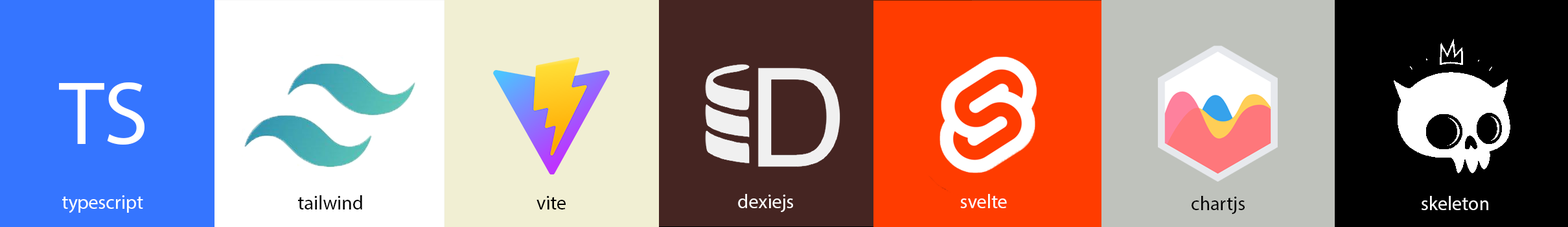
<style>
.page{position:relative;width:1568px;height:227px}
.page>*{position:absolute;margin:0}
.t1{font:90.7px "MyriadPro-Regular";color:#ffffff}
.t2{font:19.4px "MyriadPro-Regular";color:#ffffff}
.t3{font:19.4px "MyriadPro-Regular";color:#000000}
</style>
<div class="page">
<p class="t1" style="left:59px;top:82px;width:85px;height:62px">TS</p>
<p class="t2" style="left:62px;top:195px;width:81px;height:18px">typescript</p>
<p class="t3" style="left:298px;top:195px;width:64px;height:14px">tailwind</p>
<p class="t3" style="left:536px;top:196px;width:30px;height:13px">vite</p>
<p class="t2" style="left:738px;top:194px;width:55px;height:18px">dexiejs</p>
<p class="t2" style="left:960px;top:194px;width:47px;height:14px">svelte</p>
<p class="t3" style="left:1192px;top:196px;width:53px;height:18px">chartjs</p>
<p class="t2" style="left:1422px;top:196px;width:66px;height:14px">skeleton</p>
</div>
